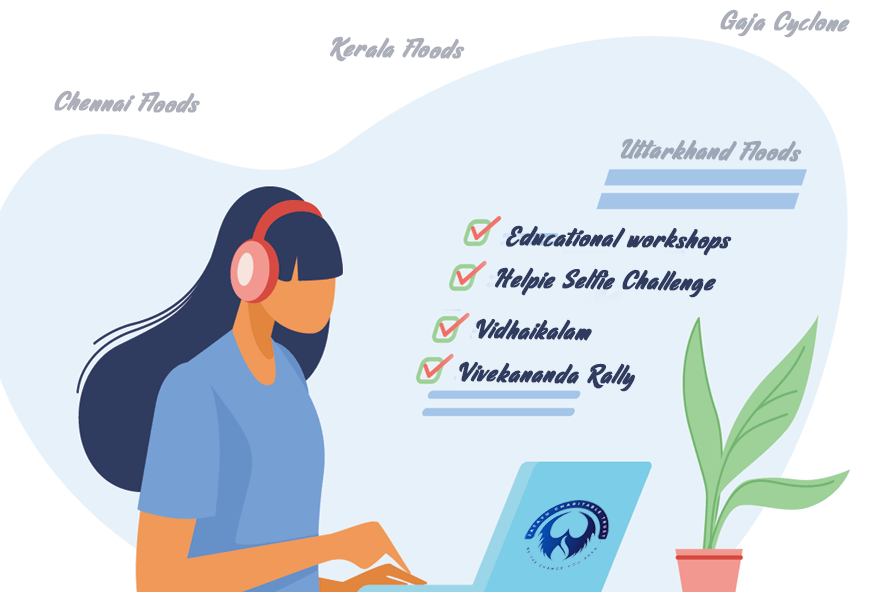
<style>
.page{position:relative;width:875px;height:592px;background:#e7f1f9}
.page>*{position:absolute;margin:0}
.t1{font:28.8px "RaphtaliaPersonalUseOnly";letter-spacing:0.02em;color:#aaaeb9;font-weight:bold;scale:0.95 1}
.t2{font:28.8px "RaphtaliaPersonalUseOnly";letter-spacing:0.02em;color:#acafba;font-weight:bold;scale:0.95 1}
.t3{font:28.8px "RaphtaliaPersonalUseOnly";letter-spacing:0.02em;color:#9ca6b6;font-weight:bold;scale:0.95 1}
.t4{font:28.8px "RaphtaliaPersonalUseOnly";letter-spacing:0.02em;color:#2f3c60;font-weight:bold;scale:0.95 1}
</style>
<div class="page">
<p class="t1" style="left:720px;top:9px;width:130px;height:29px;rotate:1deg">Gaja Cyclone</p>
<p class="t2" style="left:330px;top:36px;width:135px;height:26px;rotate:1deg">Kerala Floods</p>
<p class="t2" style="left:54px;top:90px;width:146px;height:23px;rotate:1deg">Chennai Floods</p>
<p class="t3" style="left:620px;top:138px;width:182px;height:24px;rotate:1deg">Uttarkhand Floods</p>
<p class="t4" style="left:506px;top:225px;width:226px;height:31px;rotate:1deg">Educational workshops</p>
<p class="t4" style="left:495px;top:267px;width:221px;height:31px;rotate:1deg">Helpie Selfie Challenge</p>
<p class="t4" style="left:476px;top:318px;width:116px;height:23px;rotate:1deg">Vidhaikalam</p>
<p class="t4" style="left:459px;top:361px;width:176px;height:31px;rotate:1deg">Vivekananda Rally</p>
</div>
